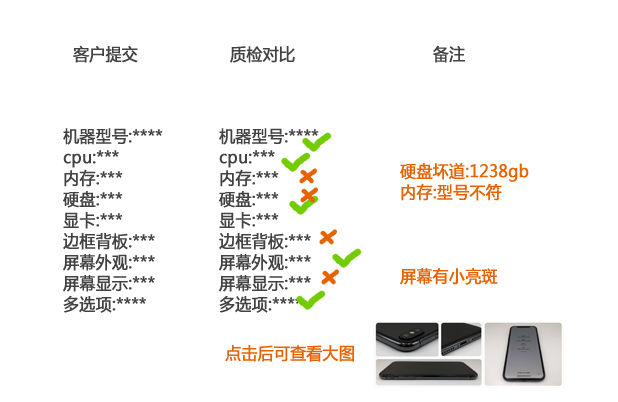
<style>
.page{position:relative;width:618px;height:402px;background:#ffffff}
.page>*{position:absolute;margin:0}
.t1{font:16.7px "MicrosoftYaHei";color:#424242;font-weight:bold;scale:0.95 1}
.t2{font:16.7px/21px "MicrosoftYaHei";color:#424242;font-weight:bold;scale:0.95 1}
.t3{font:16.7px/21px "MicrosoftYaHei";color:#e86200;font-weight:bold;scale:0.95 1}
.t4{font:16.7px "MicrosoftYaHei";color:#e86200;font-weight:bold;scale:0.95 1}
</style>
<div class="page">
<p class="t1" style="left:73px;top:45px;width:392px;height:18px">客户提交                  质检对比                           备注</p>
<p class="t2" style="left:63px;top:128px;width:100px;height:185px">机器型号:****<br>cpu:***<br>内存:***<br>硬盘:***<br>显卡:***<br>边框背板:***<br>屏幕外观:***<br>屏幕显示:***<br>多选项:****</p>
<p class="t2" style="left:219px;top:128px;width:100px;height:185px">机器型号:****<br>cpu:***<br>内存:***<br>硬盘:***<br>显卡:***<br>边框背板:***<br>屏幕外观:***<br>屏幕显示:***<br>多选项:****</p>
<p class="t3" style="left:400px;top:163px;width:129px;height:122px">硬盘坏道:1238gb<br>内存:型号不符<br><br><br><br>屏幕有小亮斑</p>
<p class="t4" style="left:225px;top:345px;width:129px;height:17px">点击后可查看大图</p>
</div>
